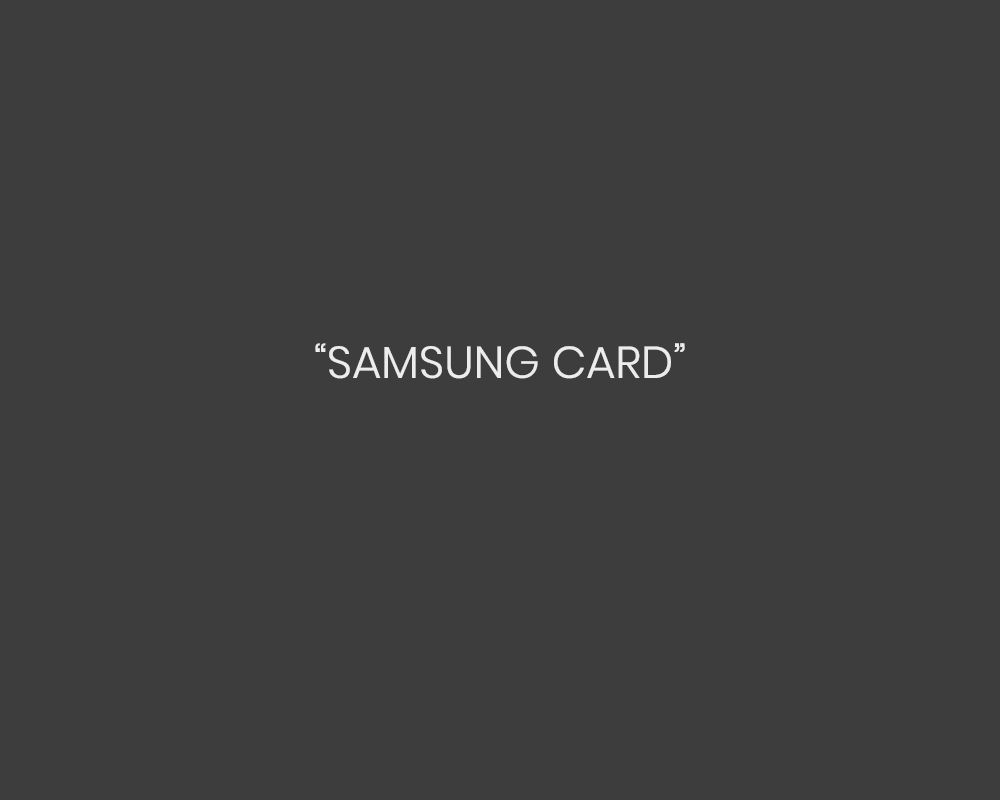
<style>
.page{position:relative;width:1000px;height:800px;background:#3d3d3d}
.page>*{position:absolute;margin:0}
.t1{font:44.5px "Poppins-Light";letter-spacing:0.005em;color:#ececec}
</style>
<div class="page">
<p class="t1" style="left:315px;top:343px;width:370px;height:36px">“SAMSUNG CARD”</p>
</div>
